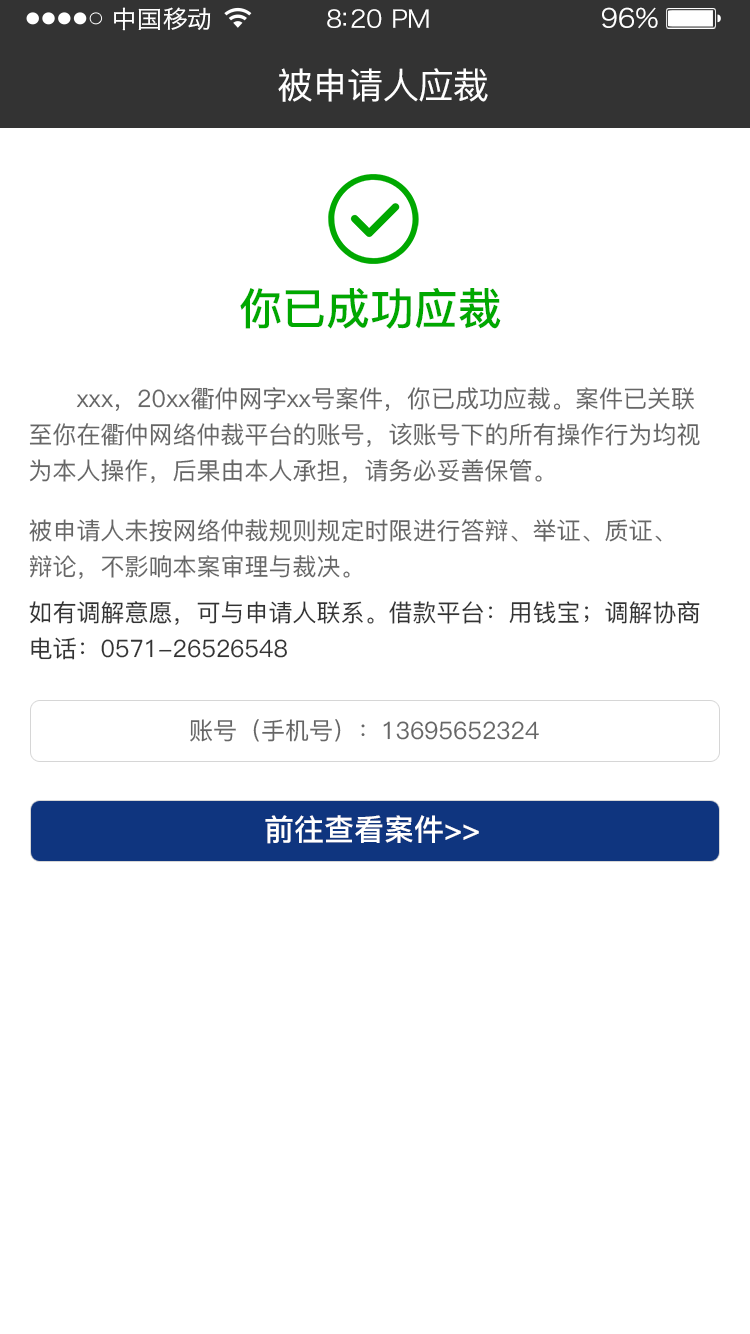
<style>
.page{position:relative;width:750px;height:1334px;background:#ffffff}
.page>*{position:absolute;margin:0}
.t1{font:24px "HiraginoSansGB-W3";letter-spacing:0.02em;color:#ffffff;scale:1.03 1}
.t2{font:24px "HiraginoSansGB-W3";letter-spacing:-0.02em;color:#ffffff;scale:1.03 1}
.t3{font:26.2px "HiraginoSansGB-W3";letter-spacing:-0.02em;color:#ffffff;scale:1.03 1}
.t4{font:36px "PingFang-SC-Medium";letter-spacing:-0.02em;color:#ffffff}
.t5{font:43.7px "PingFang-SC-Bold";color:#00a800}
.t6{font:24px/36px "PingFang-SC-Medium";color:#666666}
.t7{font:24px/36px "PingFang-SC-Medium";color:#333333}
.t8{font:24px "PingFang-SC-Medium";color:#666666}
.t9{font:30px "PingFang-SC-Bold";color:#ffffff}
</style>
<div class="page">
<p class="t1" style="left:114px;top:7px;width:97px;height:24px">中国移动</p>
<p class="t2" style="left:327px;top:9px;width:102px;height:19px">8:20 PM</p>
<p class="t3" style="left:602px;top:7px;width:56px;height:22px">96%</p>
<p class="t4" style="left:278px;top:68px;width:210px;height:34px">被申请人应裁</p>
<p class="t5" style="left:240px;top:288px;width:261px;height:41px">你已成功应裁</p>
<p class="t6" style="left:29px;top:387px;width:671px;height:96px">xxx，20xx衢仲网字xx号案件，你已成功应裁。案件已关联<br>至你在衢仲网络仲裁平台的账号，该账号下的所有操作行为均视<br>为本人操作，后果由本人承担，请务必妥善保管。</p>
<p class="t6" style="left:29px;top:519px;width:633px;height:60px">被申请人未按网络仲裁规则规定时限进行答辩、举证、质证、<br>辩论，不影响本案审理与裁决。</p>
<p class="t7" style="left:29px;top:601px;width:671px;height:59px">如有调解意愿，可与申请人联系。借款平台：用钱宝；调解协商<br>电话：0571-26526548</p>
<p class="t8" style="left:190px;top:719px;width:349px;height:23px">账号（手机号）：13695652324</p>
<p class="t9" style="left:265px;top:815px;width:214px;height:29px">前往查看案件&gt;&gt;</p>
</div>
